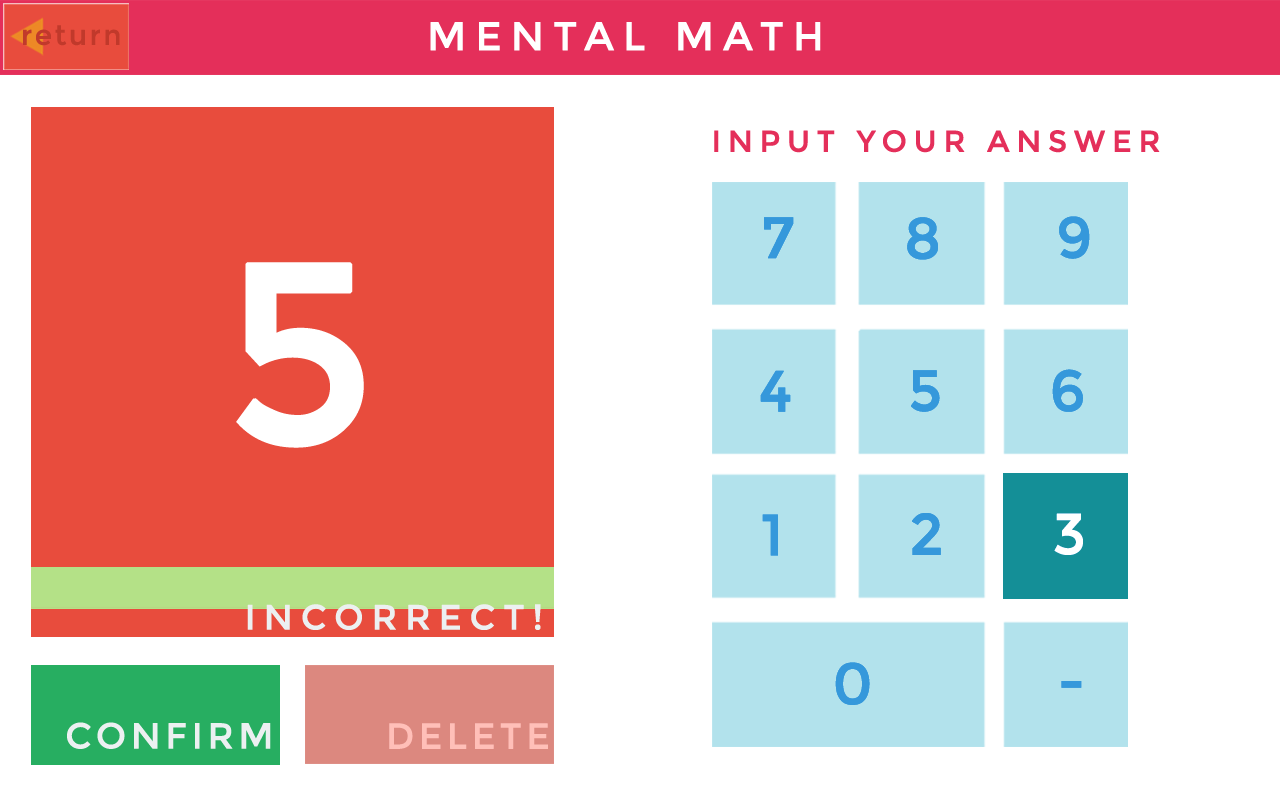
<style>
.page{position:relative;width:1280px;height:800px;background:#ffffff}
.page>*{position:absolute;margin:0}
.t1{font:30px "Montserrat-Regular";letter-spacing:0.2em;color:#e42f5a;text-transform:uppercase;font-weight:bold}
.t2{font:57.6px "Montserrat-Regular";letter-spacing:0.2em;color:#3598db;text-transform:uppercase;font-weight:bold}
.t3{font:256.5px "Montserrat-Regular";letter-spacing:0.2em;color:#ffffff;text-transform:uppercase;font-weight:bold}
.t4{font:57.6px "Montserrat-Regular";letter-spacing:0.2em;color:#ffffff;text-transform:uppercase;font-weight:bold}
.t5{font:35.1px "Montserrat-Regular";letter-spacing:0.2em;color:#ecf0f1;text-transform:uppercase;font-weight:bold}
.t6{font:36px "Montserrat-Regular";letter-spacing:0.1em;color:#ecf0f1;text-transform:uppercase;font-weight:bold}
.t7{font:36px "Montserrat-Regular";letter-spacing:0.1em;color:#ffbfb8;text-transform:uppercase;font-weight:bold}
</style>
<div class="page">
<p class="t1" style="left:714px;top:130px;width:446px;height:23px">Input your Answer</p>
<p class="t2" style="left:764px;top:217px;width:30px;height:42px">7</p>
<p class="t2" style="left:907px;top:217px;width:31px;height:43px">8</p>
<p class="t2" style="left:1059px;top:216px;width:31px;height:43px">9</p>
<p class="t3" style="left:236px;top:262px;width:128px;height:186px">5</p>
<p class="t2" style="left:760px;top:370px;width:31px;height:42px">4</p>
<p class="t2" style="left:911px;top:370px;width:29px;height:42px">5</p>
<p class="t2" style="left:1052px;top:369px;width:31px;height:43px">6</p>
<p class="t2" style="left:762px;top:514px;width:16px;height:42px">1</p>
<p class="t2" style="left:912px;top:513px;width:29px;height:42px">2</p>
<p class="t4" style="left:1054px;top:513px;width:29px;height:42px">3</p>
<p class="t5" style="left:247px;top:604px;width:294px;height:26px">Incorrect!</p>
<p class="t2" style="left:835px;top:662px;width:35px;height:43px">0</p>
<p class="t2" style="left:1061px;top:681px;width:21px;height:7px">-</p>
<p class="t6" style="left:67px;top:722px;width:204px;height:27px">Confirm</p>
<p class="t7" style="left:389px;top:723px;width:159px;height:26px">Delete</p>
</div>
